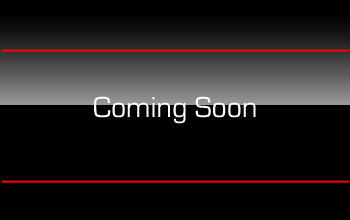
<style>
.page{position:relative;width:350px;height:220px;background:#000000}
.page>*{position:absolute;margin:0}
.t1{font:30px "EurostileRegular";color:#ffffff}
</style>
<div class="page">
<p class="t1" style="left:94px;top:96px;width:162px;height:28px">Coming Soon</p>
</div>
